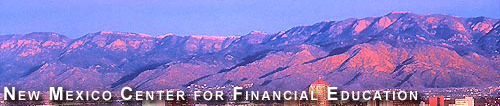
<style>
.page{position:relative;width:500px;height:106px}
.page>*{position:absolute;margin:0}
.t1{font:17.1px "Arial-BoldMT";letter-spacing:0.1em;color:#ffffff;font-variant:small-caps}
</style>
<div class="page">
<p class="t1" style="left:4px;top:86px;width:413px;height:15px">New Mexico Center for Financial Education</p>
</div>
